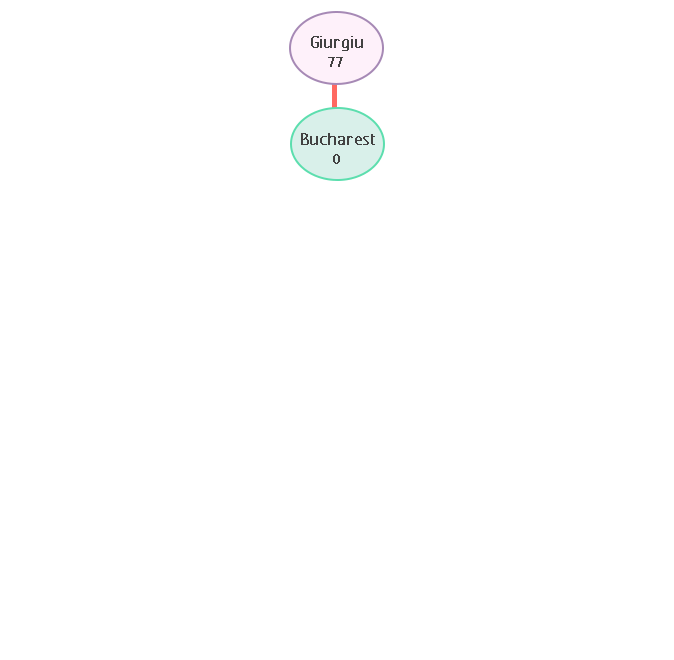
<style>
.page{position:relative;width:674px;height:660px;background:#ffffff}
.page>*{position:absolute;margin:0}
.t1{font:20.8px "FCActiveRegular";color:#424242;font-weight:bold}
.t2{font:16.7px "FCActiveRegular";color:#424141;font-weight:bold}
</style>
<div class="page">
<p class="t1" style="left:311px;top:36px;width:52px;height:15px">Giurgiu</p>
<p class="t2" style="left:328px;top:57px;width:15px;height:10px">77</p>
<p class="t1" style="left:301px;top:133px;width:74px;height:12px">Bucharest</p>
<p class="t2" style="left:333px;top:154px;width:7px;height:10px">0</p>
</div>
